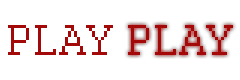
<style>
.page{position:relative;width:240px;height:80px;background:#ffffff}
.page>*{position:absolute;margin:0}
.t1{font:48px "Courier";color:#a40909}
</style>
<div class="page">
<p class="t1" style="left:8px;top:25px;width:105px;height:30px">PLAY</p>
<p class="t1" style="left:128px;top:25px;width:105px;height:30px">PLAY</p>
</div>
